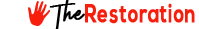
<style>
.page{position:relative;width:199px;height:29px;background:#ffffff}
.page>*{position:absolute;margin:0}
.t1{font:25.2px "NexaBold";letter-spacing:0.005em;color:#f71e0e;font-weight:bold;scale:0.71 1}
</style>
<div class="page">
<p class="t1" style="left:85px;top:3px;width:110px;height:21px">Restoration</p>
</div>
